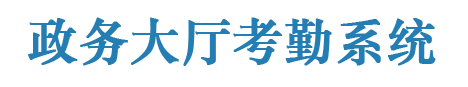
<style>
.page{position:relative;width:468px;height:87px;background:#ffffff}
.page>*{position:absolute;margin:0}
.t1{font:50px "STZhongsong";color:#247eb4;font-weight:bold}
</style>
<div class="page">
<p class="t1" style="left:28px;top:17px;width:408px;height:49px">政务大厅考勤系统</p>
</div>
